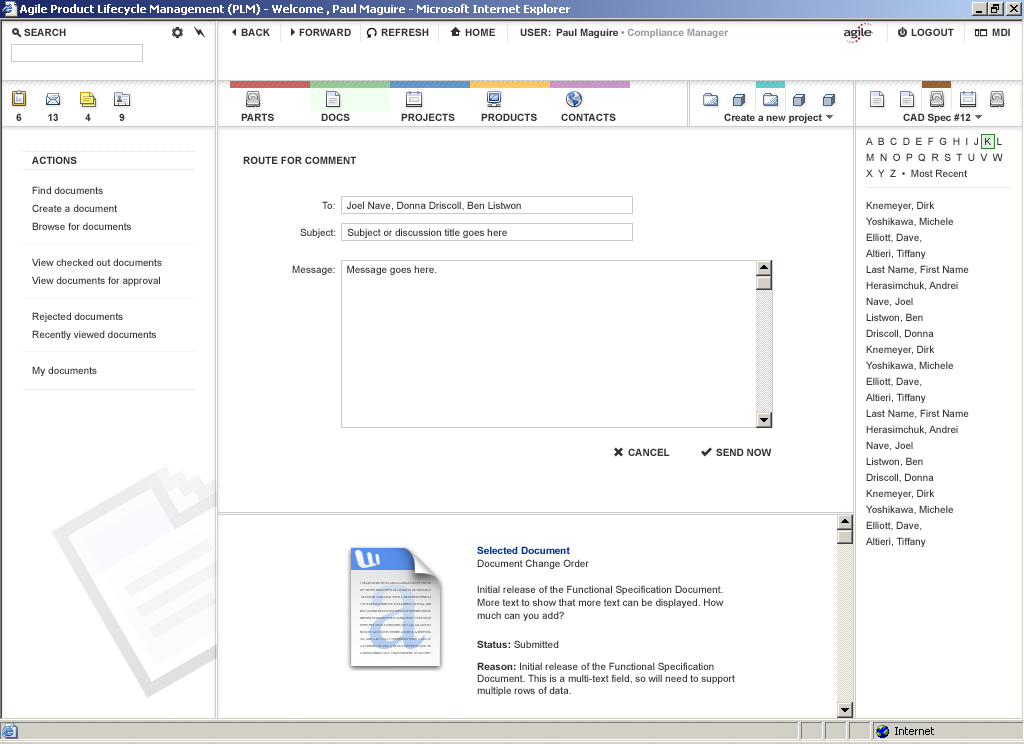
<style>
.page{position:relative;width:1024px;height:744px;background:#ffffff}
.page>*{position:absolute;margin:0}
.t1{font:10px "Arial-BoldMT";color:#333333}
.t2{font:10px "Arial-BoldMT";color:#999999}
.t3{font:10px/16px "ArialMT";color:#333333}
.t4{font:10px/18px "ArialMT";color:#333333}
.t5{font:10px "ArialMT";color:#333333}
.t6{font:10px/13px "ArialMT";color:#333333}
.t7{font:10px/12px "Arial-BoldMT";color:#003399}
.t8{font:10px/12px "ArialMT";color:#333333}
.t9{font:10px/12px "Arial-BoldMT";color:#333333}
</style>
<div class="page">
<p class="t1" style="left:24px;top:28px;width:42px;height:8px">SEARCH</p>
<p class="t1" style="left:241px;top:28px;width:29px;height:8px">BACK</p>
<p class="t1" style="left:299px;top:28px;width:52px;height:8px">FORWARD</p>
<p class="t1" style="left:381px;top:28px;width:48px;height:8px">REFRESH</p>
<p class="t1" style="left:465px;top:28px;width:30px;height:8px">HOME</p>
<p class="t2" style="left:520px;top:28px;width:209px;height:10px"><span class="t1">USER: Paul Maguire </span>• Compliance Manager</p>
<p class="t1" style="left:911px;top:28px;width:43px;height:8px">LOGOUT</p>
<p class="t1" style="left:992px;top:28px;width:18px;height:8px">MDI</p>
<p class="t1" style="left:16px;top:113px;width:6px;height:8px">6</p>
<p class="t1" style="left:48px;top:113px;width:10px;height:8px">13</p>
<p class="t1" style="left:85px;top:113px;width:6px;height:8px">4</p>
<p class="t1" style="left:119px;top:113px;width:6px;height:8px">9</p>
<p class="t1" style="left:241px;top:113px;width:33px;height:8px">PARTS</p>
<p class="t1" style="left:321px;top:113px;width:29px;height:8px">DOCS</p>
<p class="t1" style="left:401px;top:113px;width:54px;height:8px">PROJECTS</p>
<p class="t1" style="left:481px;top:113px;width:56px;height:8px">PRODUCTS</p>
<p class="t1" style="left:561px;top:113px;width:55px;height:8px">CONTACTS</p>
<p class="t1" style="left:724px;top:113px;width:98px;height:10px">Create a new project</p>
<p class="t1" style="left:903px;top:113px;width:68px;height:10px">CAD Spec #12</p>
<p class="t3" style="left:866px;top:137px;width:137px;height:410px">A  B  C  D  E  F  G  H  I  J  K  L<br>M  N  O  P  Q  R  S  T  U  V  W <br>X  Y  Z  •  Most Recent<br><br>Knemeyer, Dirk<br>Yoshikawa, Michele<br>Elliott, Dave,<br>Altieri, Tiffany<br>Last Name, First Name<br>Herasimchuk, Andrei<br>Nave, Joel<br>Listwon, Ben<br>Driscoll, Donna<br>Knemeyer, Dirk<br>Yoshikawa, Michele<br>Elliott, Dave,<br>Altieri, Tiffany<br>Last Name, First Name<br>Herasimchuk, Andrei<br>Nave, Joel<br>Listwon, Ben<br>Driscoll, Donna<br>Knemeyer, Dirk<br>Yoshikawa, Michele<br>Elliott, Dave,<br>Altieri, Tiffany</p>
<p class="t1" style="left:32px;top:156px;width:45px;height:8px">ACTIONS</p>
<p class="t1" style="left:243px;top:156px;width:113px;height:8px">ROUTE FOR COMMENT</p>
<p class="t4" style="left:32px;top:186px;width:130px;height:190px">Find documents<br>Create a document<br>Browse for documents<br><br>View checked out documents<br>View documents for approval<br><br>Rejected documents<br>Recently viewed documents<br><br>My documents</p>
<p class="t5" style="left:322px;top:201px;width:199px;height:10px">To:    Joel Nave, Donna Driscoll, Ben Listwon</p>
<p class="t5" style="left:300px;top:228px;width:207px;height:10px">Subject:    Subject or discussion title goes here</p>
<p class="t5" style="left:292px;top:265px;width:145px;height:10px">Message:    Message goes here.</p>
<p class="t1" style="left:628px;top:448px;width:42px;height:8px">CANCEL</p>
<p class="t1" style="left:716px;top:448px;width:56px;height:8px">SEND NOW</p>
<p class="t6" style="left:477px;top:546px;width:247px;height:75px"><span class="t7">Selected Document<br></span>Document Change Order<br><br>Initial release of the Functional Specification Document.<br>More text to show that more text can be displayed. How<br>much can you add?</p>
<p class="t8" style="left:477px;top:640px;width:258px;height:56px"><span class="t9">Status:</span> Submitted<br><span class="t9">Reason:</span> Initial release of the Functional Specification<br>Document. This is a multi-text field, so will need to support<br>multiple rows of data.</p>
</div>
